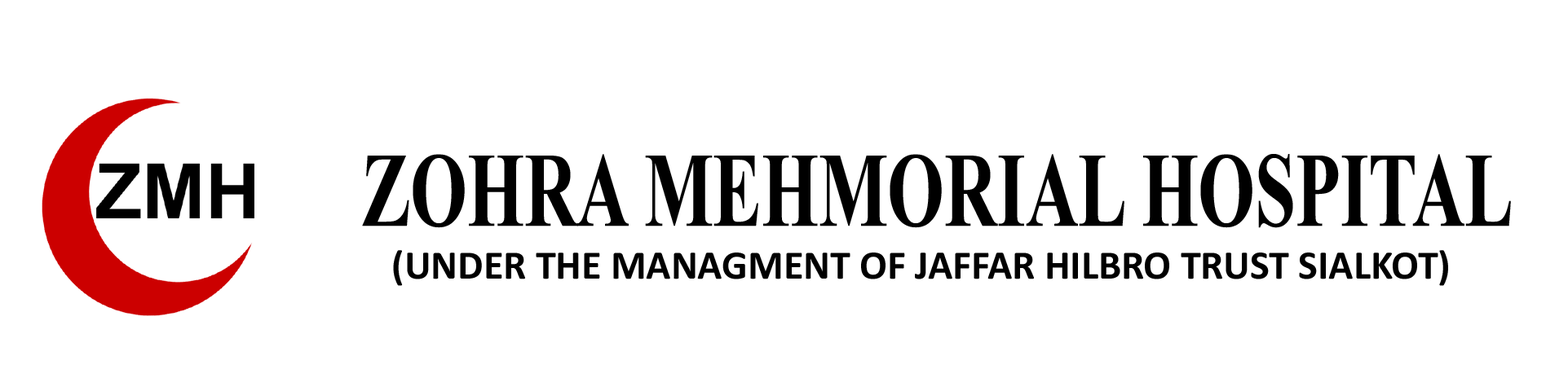
<style>
.page{position:relative;width:1568px;height:369px;background:#ffffff}
.page>*{position:absolute;margin:0}
.t1{font:106px "TimesNewRomanPS-BoldMT";color:#000000;scale:0.69 1}
.t2{font:40.8px "Calibri-Bold";color:#000000}
</style>
<div class="page">
<p class="t1" style="left:362px;top:154px;width:1149px;height:74px">ZOHRA MEHMORIAL HOSPITAL</p>
<p class="t2" style="left:393px;top:250px;width:1055px;height:36px">(UNDER THE MANAGMENT OF JAFFAR HILBRO TRUST SIALKOT)</p>
</div>
